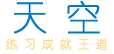
<style>
.page{position:relative;width:114px;height:54px;background:#ffffff}
.page>*{position:absolute;margin:0}
.t1{font:36px "YouYuan";color:#0079c2}
.t2{font:12px "YouYuan";color:#fdd46f}
</style>
<div class="page">
<p class="t1" style="left:14px;top:0px;width:86px;height:34px">天 空</p>
<p class="t2" style="left:6px;top:38px;width:101px;height:12px">练 习 成 就 王 道</p>
</div>
